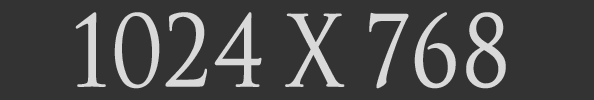
<style>
.page{position:relative;width:594px;height:100px;background:#333333}
.page>*{position:absolute;margin:0}
.t1{font:95.5px "SpaceandAstronomy";color:#d9d9d9;scale:0.87 1}
</style>
<div class="page">
<p class="t1" style="left:75px;top:12px;width:431px;height:77px">1024 x 768</p>
</div>
